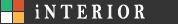
<style>
.page{position:relative;width:178px;height:24px;background:#333333}
.page>*{position:absolute;margin:0}
.t1{font:20.9px "BellMTBold";color:#fbf7f7;scale:0.77 1}
</style>
<div class="page">
<p class="t1" style="left:35px;top:4px;width:110px;height:15px">i N T E R I O R</p>
</div>
